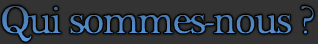
<style>
.page{position:relative;width:318px;height:44px;background:#333333}
.page>*{position:absolute;margin:0}
.t1{font:40px "PlantagenetCherokee";letter-spacing:-0.07em;font-weight:bold}
</style>
<div class="page">
<p class="t1" style="left:1px;top:5px;width:314px;height:38px">Qui sommes-nous ?</p>
</div>
